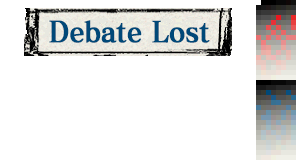
<style>
.page{position:relative;width:296px;height:160px;background:#ffffff}
.page>*{position:absolute;margin:0}
.t1{font:28.6px "MatissePro-B";letter-spacing:-0.025em;color:#004878;font-weight:bold;scale:0.91 1}
</style>
<div class="page">
<p class="t1" style="left:49px;top:20px;width:161px;height:23px">Debate Lost</p>
</div>
